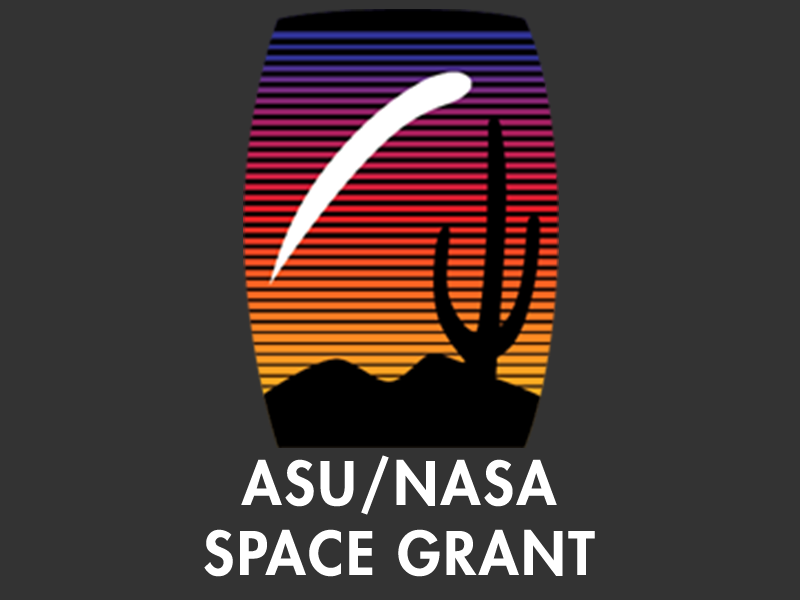
<style>
.page{position:relative;width:800px;height:600px;background:#333333}
.page>*{position:absolute;margin:0}
.t1{font:58.3px "FuturaLT-Heavy";letter-spacing:0.05em;color:#ffffff}
</style>
<div class="page">
<p class="t1" style="left:204px;top:455px;width:391px;height:122px;text-align:center">ASU/NASA<br>SPACE GRANT</p>
</div>
